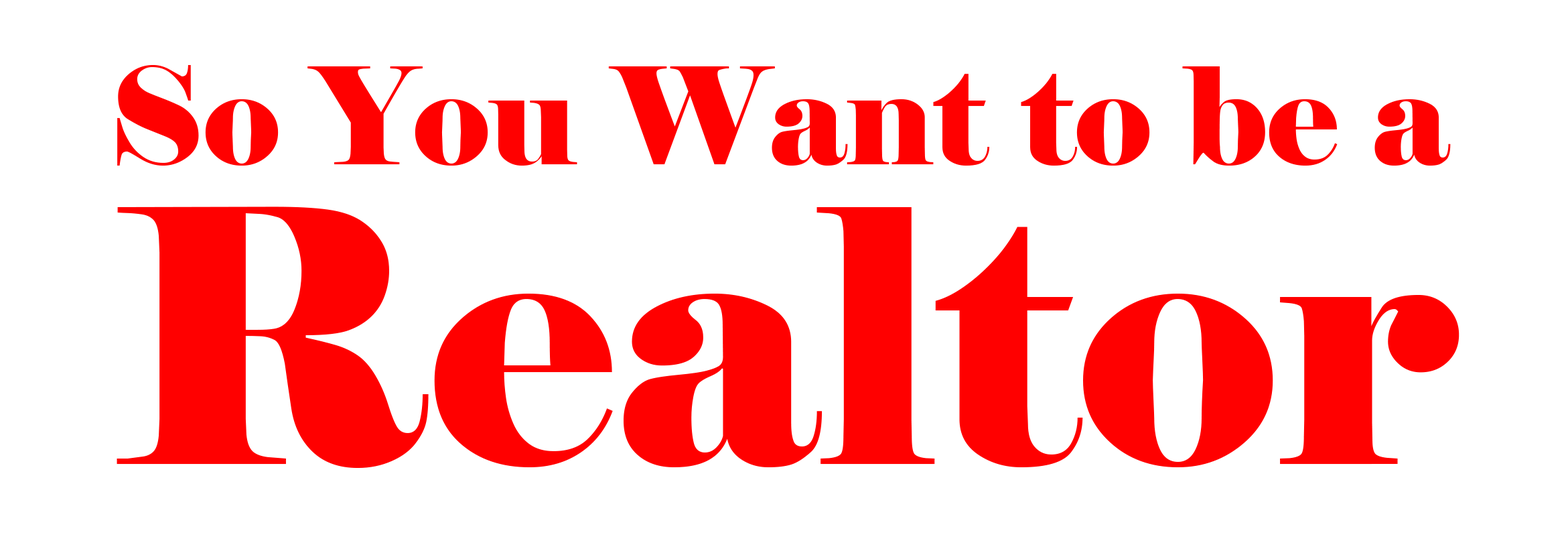
<style>
.page{position:relative;width:1568px;height:539px;background:#ffffff}
.page>*{position:absolute;margin:0}
.t1{font:134px "Elephant-Regular";color:#ff0000}
.t2{font:351.5px "Elephant-Regular";color:#ff0000}
</style>
<div class="page">
<p class="t1" style="left:117px;top:65px;width:1334px;height:100px">So You Want to be a</p>
<p class="t2" style="left:117px;top:206px;width:1342px;height:262px">Realtor</p>
</div>
